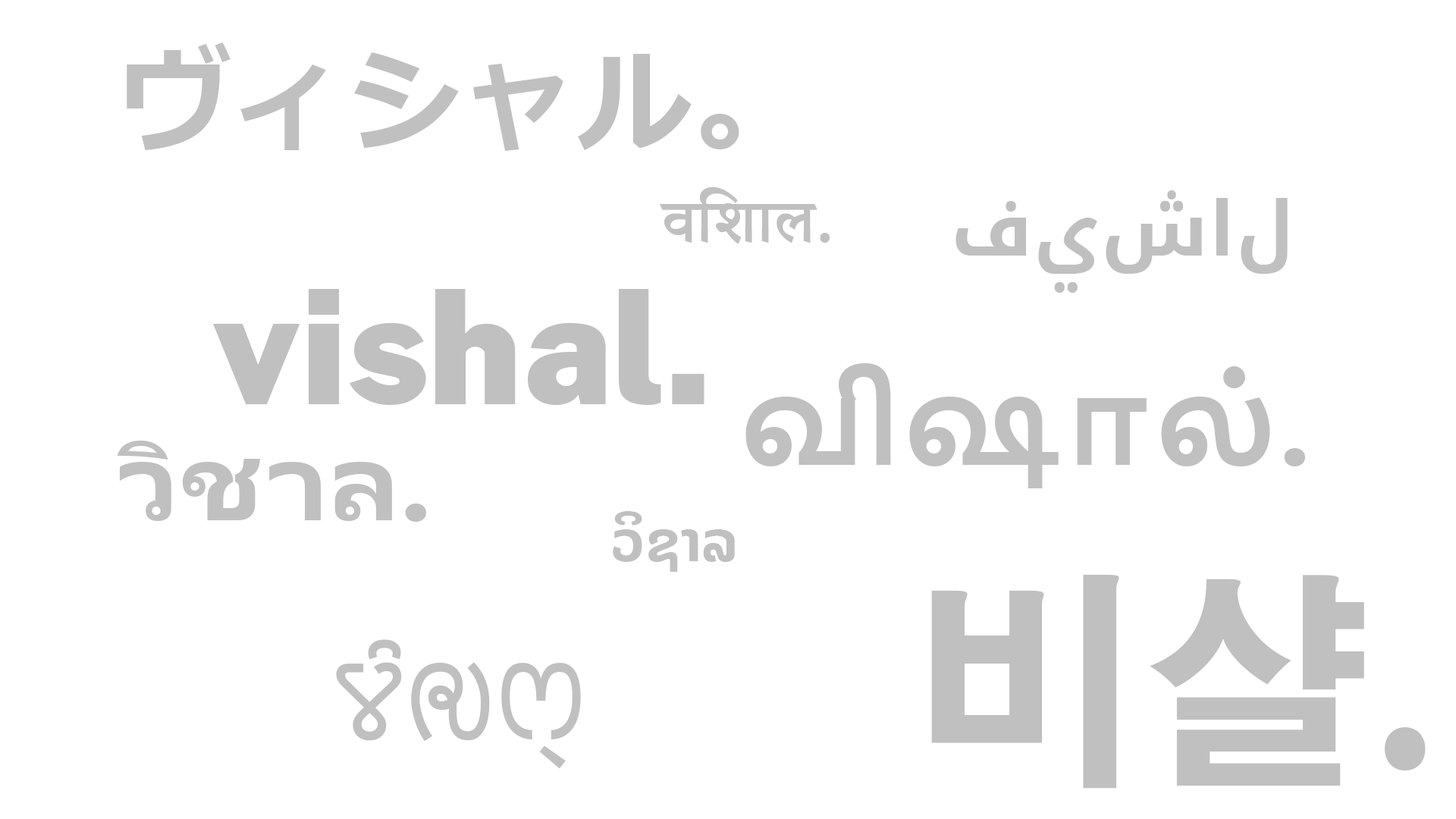
<style>
.page{position:relative;width:1456px;height:819px;background:#ffffff}
.page>*{position:absolute;margin:0}
.t1{font:113.7px "Meiryo-Bold";letter-spacing:0.01em;color:#c0c0c0}
.t2{font:75.8px "AdobeDevanagari-Bold";letter-spacing:0.01em;color:#c0c0c0}
.t3{font:75.8px "NotoKufiArabic-Bold";letter-spacing:0.01em;color:#c0c0c0}
.t4{font:151.7px "Morrison-Black";letter-spacing:0.01em;color:#c0c0c0}
.t5{font:113.7px "NirmalaUI-Bold";letter-spacing:0.01em;color:#c0c0c0}
.t6{font:113.7px "Leelawadee-Bold";letter-spacing:0.01em;color:#c0c0c0}
.t7{font:56.9px "NotoSansLao-Bold";letter-spacing:0.01em;color:#c0c0c0}
.t8{font:227.5px "AdobeGothicStd-Bold";letter-spacing:0.01em;color:#c0c0c0}
.t9{font:113.7px "NotoSansSaurashtra";letter-spacing:0.01em;color:#c0c0c0}
</style>
<div class="page">
<p class="t1" style="left:127px;top:42px;width:612px;height:109px">ヴィシャル。</p>
<p class="t2" style="left:660px;top:187px;width:170px;height:57px">विशाल.</p>
<p class="t3" style="left:955px;top:190px;width:333px;height:103px">فيشال</p>
<p class="t4" style="left:213px;top:289px;width:491px;height:116px">vishal.</p>
<p class="t5" style="left:745px;top:363px;width:560px;height:125px">விஷால்.</p>
<p class="t6" style="left:117px;top:441px;width:309px;height:81px">วิชาล.</p>
<p class="t7" style="left:613px;top:511px;width:122px;height:61px">ວິຊາລ</p>
<p class="t8" style="left:931px;top:574px;width:495px;height:215px">비샬.</p>
<p class="t9" style="left:336px;top:639px;width:245px;height:130px">ꢮꢶꢯꢭ꣄</p>
</div>
